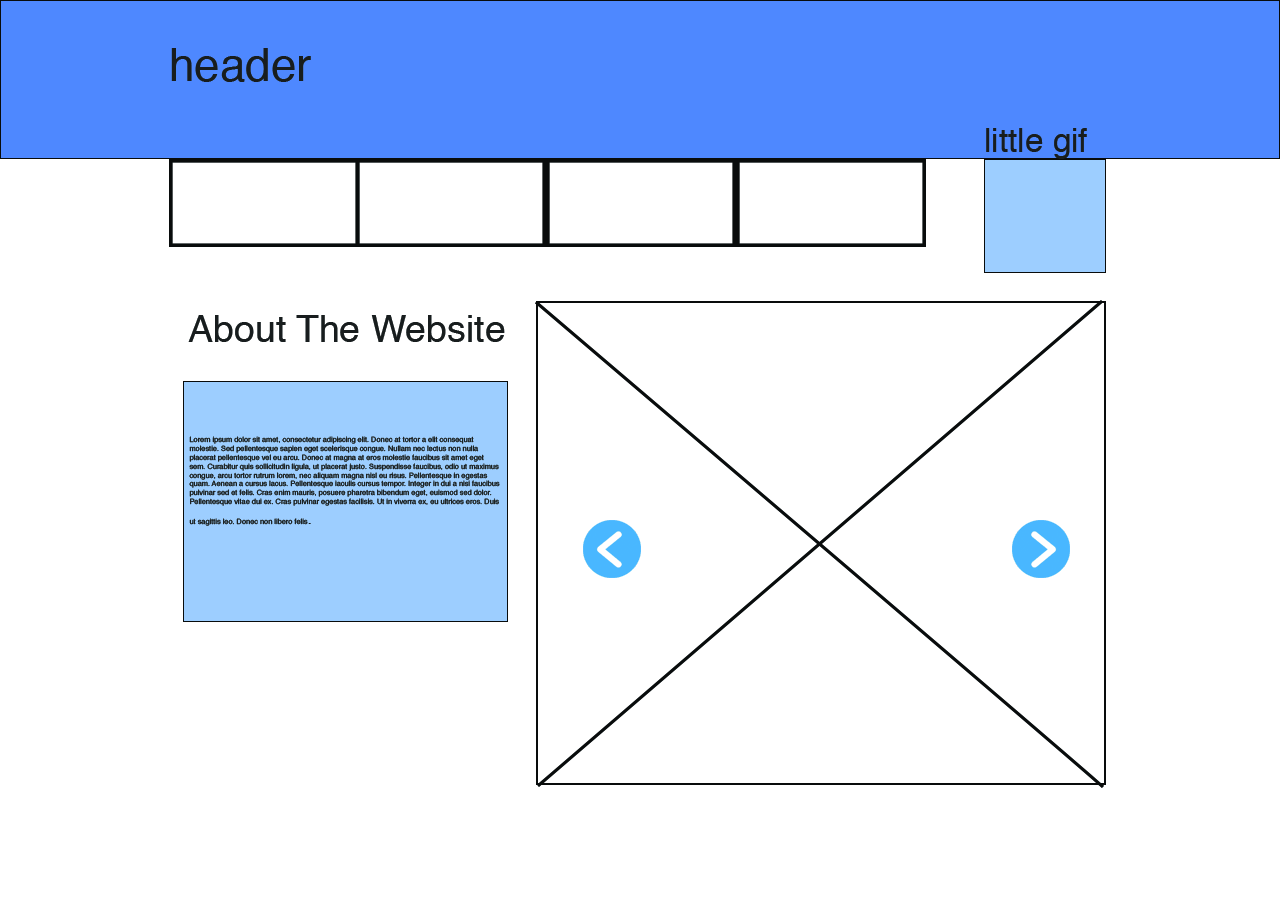
<style>
.page{position:relative;width:1280px;height:900px;background:#ffffff}
.page>*{position:absolute;margin:0}
.t1{font:45.8px "Helvetica";color:#181d1e}
.t2{font:33.3px "Helvetica";color:#181d1e}
.t3{font:37.5px "Helvetica";color:#181d1e}
.t4{font:7.4px "Helvetica";color:#181d1e}
.t5{font:16.2px "Helvetica";color:#181d1e}
</style>
<div class="page">
<p class="t1" style="left:171px;top:48px;width:140px;height:34px">header</p>
<p class="t2" style="left:986px;top:128px;width:101px;height:31px">little gif</p>
<p class="t3" style="left:188px;top:315px;width:317px;height:27px">About The Website</p>
<p class="t4" style="left:189px;top:436px;width:311px;height:90px">Lorem ipsum dolor sit amet, consectetur adipiscing elit. Donec at tortor a elit consequat molestie. Sed pellentesque sapien eget scelerisque congue. Nullam nec lectus non nulla placerat pellentesque vel eu arcu. Donec at magna at eros molestie faucibus sit amet eget sem. Curabitur quis sollicitudin ligula, ut placerat justo. Suspendisse faucibus, odio ut maximus congue, arcu tortor rutrum lorem, nec aliquam magna nisl eu risus. Pellentesque in egestas quam. Aenean a cursus lacus. Pellentesque iaculis cursus tempor. Integer in dui a nisi faucibus pulvinar sed et felis. Cras enim mauris, posuere pharetra bibendum eget, euismod sed dolor. Pellentesque vitae dui ex. Cras pulvinar egestas facilisis. Ut in viverra ex, eu ultrices eros. Duis ut sagittis leo. Donec non libero felis<span class="t5">.</span></p>
</div>
